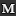
<style>
.page{position:relative;width:16px;height:16px;background:#333333}
.page>*{position:absolute;margin:0}
.t1{font:13px "PalatinoLinotype-Bold";color:#f7f7f7}
</style>
<div class="page">
<p class="t1" style="left:2px;top:4px;width:13px;height:9px">M</p>
</div>
